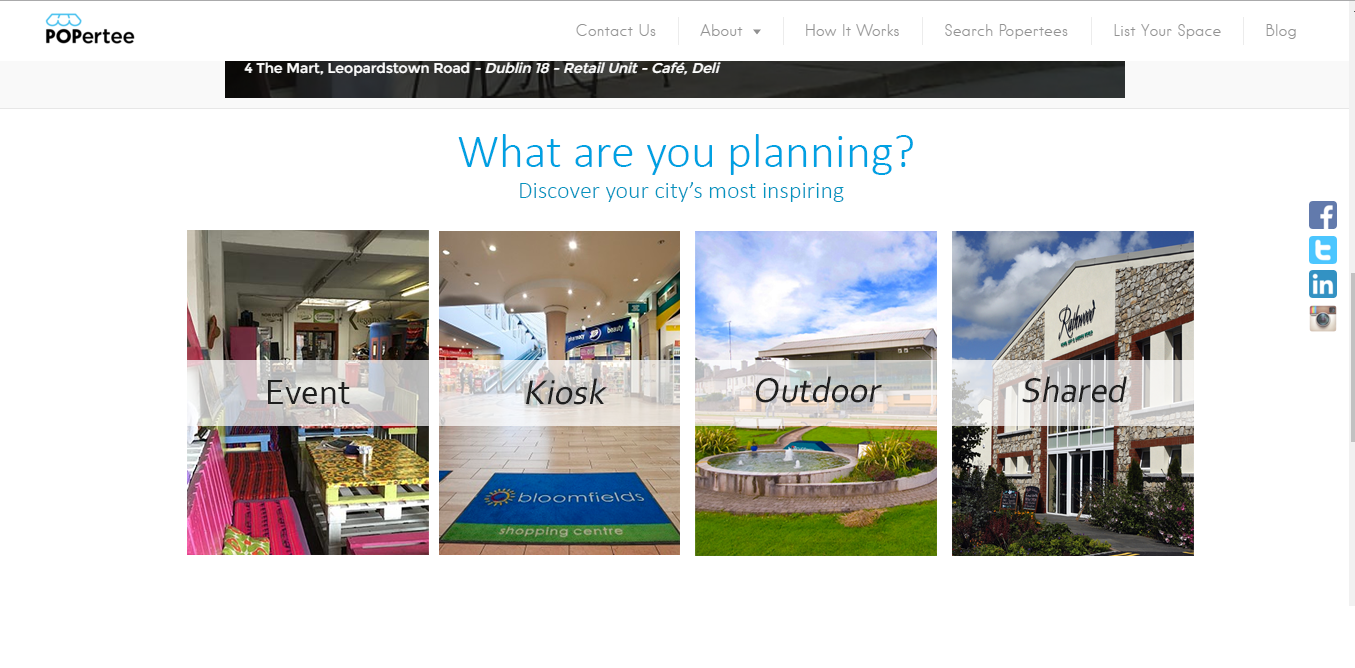
<style>
.page{position:relative;width:1355px;height:668px;background:#ffffff}
.page>*{position:absolute;margin:0}
.t1{font:48px "Calibri-Light";color:#00a1e2}
.t2{font:24px "Calibri-Light";color:#0195c0}
.t3{font:24px "Calibri-Light";color:#000000;font-style:italic}
.t4{font:36px "Corbel";color:#1f1f1f;font-style:italic}
.t5{font:36px "Corbel";color:#1f1f1f}
</style>
<div class="page">
<p class="t1" style="left:458px;top:134px;width:455px;height:41px">What are you planning?</p>
<p class="t2" style="left:520px;top:182px;width:324px;height:20px">Discover your city’s most inspiring <span class="t3">spaces</span></p>
<p class="t4" style="left:756px;top:376px;width:126px;height:27px">Outdoor</p>
<p class="t4" style="left:1022px;top:376px;width:105px;height:27px">Shared</p>
<p class="t5" style="left:268px;top:380px;width:82px;height:24px">Event</p>
<p class="t4" style="left:526px;top:378px;width:81px;height:27px">Kiosk</p>
</div>
